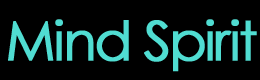
<style>
.page{position:relative;width:260px;height:80px;background:#000000}
.page>*{position:absolute;margin:0}
.t1{font:54.2px "CenturyGothic";letter-spacing:-0.05em;color:#50ddd2;font-weight:bold}
</style>
<div class="page">
<p class="t1" style="left:8px;top:19px;width:249px;height:53px">Mind Spirit</p>
</div>
